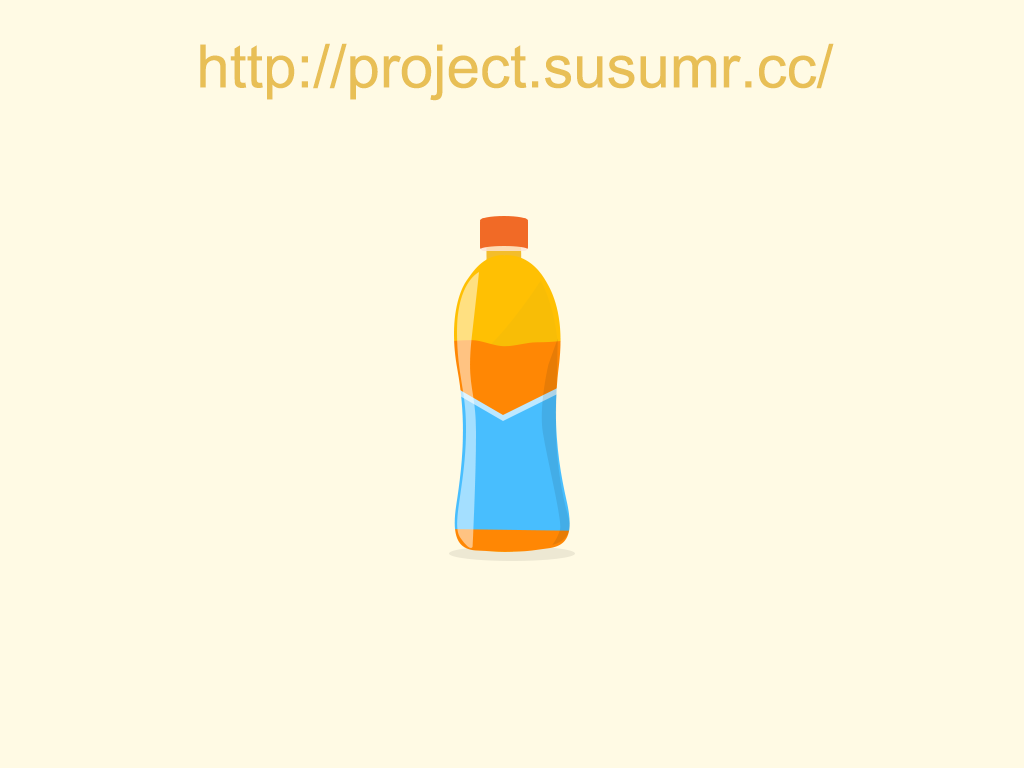
<style>
.page{position:relative;width:1024px;height:768px;background:#fffae4}
.page>*{position:absolute;margin:0}
.t1{font:60px "ArialMT";color:#e8bf56}
</style>
<div class="page">
<p class="t1" style="left:200px;top:43px;width:634px;height:58px">http://project.susumr.cc/</p>
</div>
